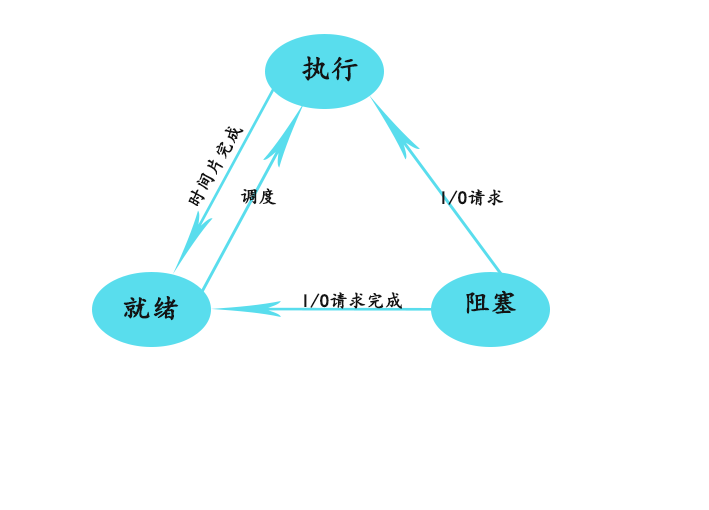
<style>
.page{position:relative;width:709px;height:510px;background:#ffffff}
.page>*{position:absolute;margin:0}
.t1{font:28.5px "KaiTi";color:#141414;font-weight:bold}
.t2{font:18px "KaiTi";color:#141414;font-weight:bold}
.t3{font:26.6px "KaiTi";color:#141414;font-weight:bold}
.t4{font:28.3px "KaiTi";color:#141414;font-weight:bold}
</style>
<div class="page">
<p class="t1" style="left:302px;top:56px;width:56px;height:26px">执行</p>
<p class="t2" style="left:188px;top:126px;width:56px;height:80px;rotate:-61deg">时间片完成</p>
<p class="t2" style="left:240px;top:188px;width:37px;height:17px">调度</p>
<p class="t2" style="left:442px;top:189px;width:62px;height:17px">I/O请求</p>
<p class="t2" style="left:304px;top:292px;width:98px;height:17px">I/O请求完成</p>
<p class="t3" style="left:466px;top:290px;width:51px;height:24px">阻塞</p>
<p class="t4" style="left:123px;top:296px;width:56px;height:25px">就绪</p>
</div>
